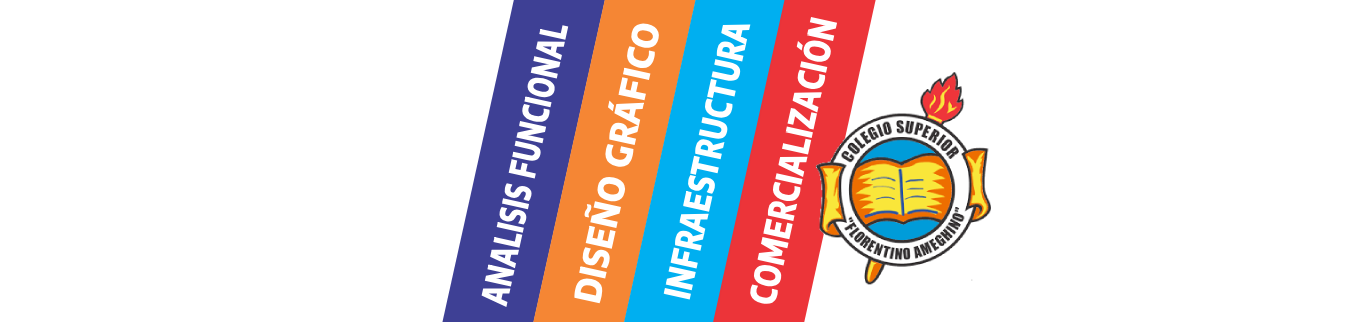
<style>
.page{position:relative;width:1366px;height:322px;background:#ffffff}
.page>*{position:absolute;margin:0}
.t1{font:36px "EncodeSansSemiExpanded-ExtraBold";color:#ffffff;font-weight:bold;scale:0.71 1}
.t2{font:36px "EncodeSansSemiExpanded-ExtraBold";color:#ffffff;font-weight:bold;scale:0.64 1}
.t3{font:36px "EncodeSansSemiExpanded-ExtraBold";color:#ffffff;font-weight:bold;scale:0.82 1}
</style>
<div class="page">
<p class="t1" style="left:749px;top:16px;width:89px;height:289px;rotate:-78deg">COMERCIALIZACIÓN</p>
<p class="t2" style="left:481px;top:25px;width:88px;height:282px;rotate:-78deg">ANALISIS FUNCIONAL</p>
<p class="t3" style="left:574px;top:23px;width:86px;height:281px;rotate:-78deg">DISEÑO GRÁFICO</p>
<p class="t1" style="left:663px;top:24px;width:88px;height:276px;rotate:-78deg">INFRAESTRUCTURA</p>
</div>
